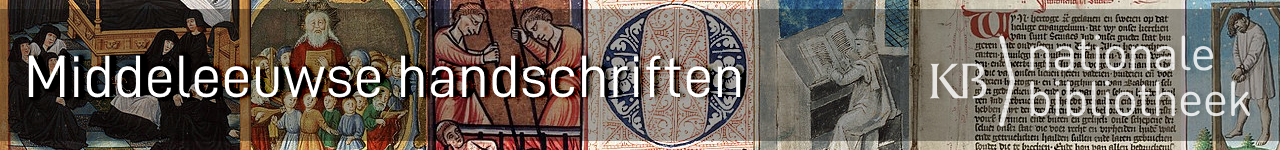
<style>
.page{position:relative;width:1280px;height:150px}
.page>*{position:absolute;margin:0}
.t1{font:60px "D-DIN";color:#ffffff}
</style>
<div class="page">
<p class="t1" style="left:28px;top:55px;width:713px;height:43px">Middeleeuwse handschriften</p>
</div>
